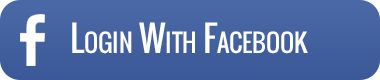
<style>
.page{position:relative;width:380px;height:80px}
.page>*{position:absolute;margin:0}
.t1{font:35px "Oswald";color:#ffffff;font-variant:small-caps}
</style>
<div class="page">
<p class="t1" style="left:72px;top:22px;width:236px;height:32px">Login With Facebook</p>
</div>
